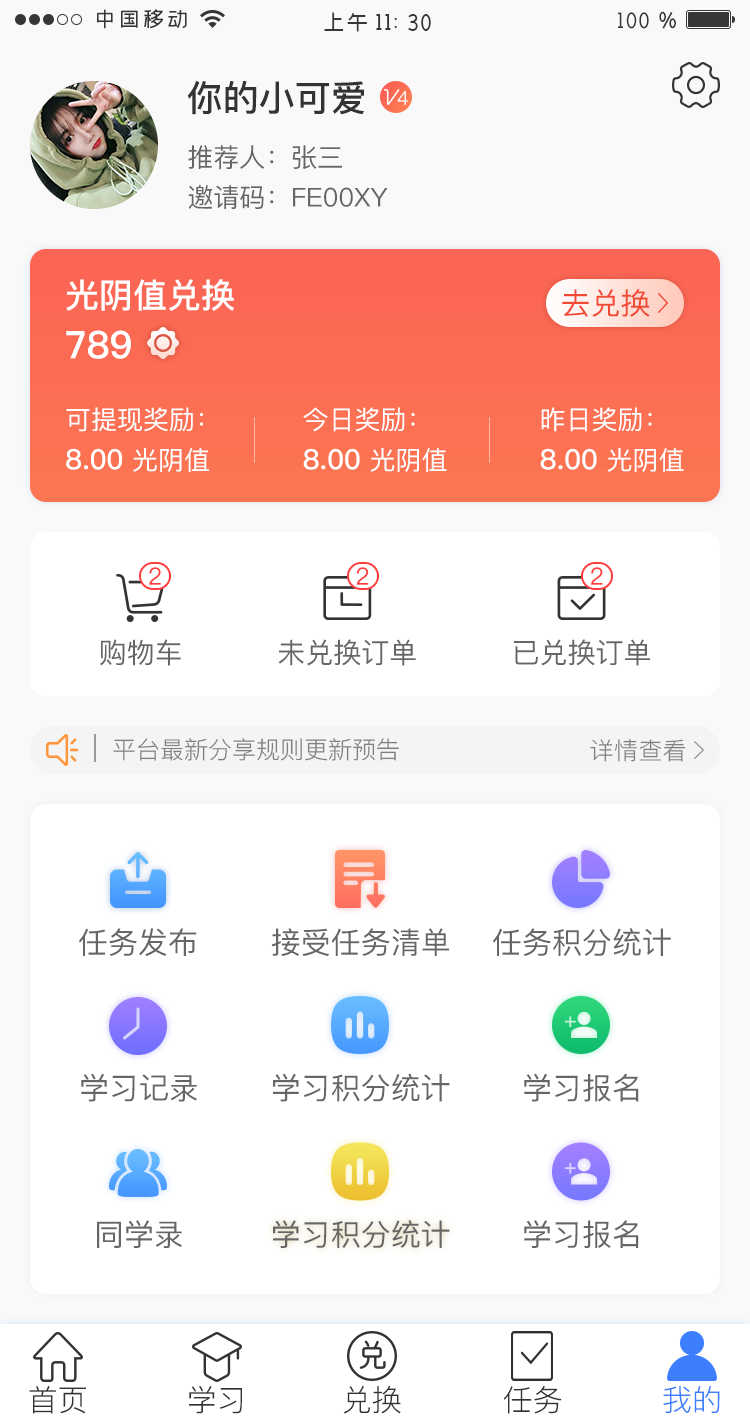
<style>
.page{position:relative;width:750px;height:1422px;background:#ffffff}
.page>*{position:absolute;margin:0}
.t1{font:36px "PingFang-SC-Bold";color:#333333;text-transform:uppercase}
.t2{font:26px "PingFang-SC-Medium";color:#666666;text-transform:uppercase}
.t3{font:34px "PingFang-SC-Bold";color:#ffffff;text-transform:uppercase}
.t4{font:30px "PingFang-SC-Medium";color:#f24934;text-transform:uppercase}
.t5{font:38px "PingFang-SC-Heavy";color:#ffffff;text-transform:uppercase}
.t6{font:26px "PingFang-SC-Medium";color:#ffffff;text-transform:uppercase}
.t7{font:28px "PingFang-SC-Bold";color:#ffffff;text-transform:uppercase}
.t8{font:24px "PingFang-SC-Medium";color:#ff3d3d;text-transform:uppercase}
.t9{font:28px "PingFang-SC-Medium";color:#666666;text-transform:uppercase}
.t10{font:24px "PingFang-SC-Regular";color:#808080}
.t11{font:24px "PingFang-SC-Regular";letter-spacing:0.015em;color:#808080}
.t12{font:30px "PingFang-SC-Medium";color:#666666;text-transform:uppercase}
.t13{font:30px "PingFang-SC-Regular";color:#333333;text-transform:uppercase}
.t14{font:30px "PingFang-SC-Regular";color:#3d7eff;text-transform:uppercase}
</style>
<div class="page">
<p class="t1" style="left:188px;top:80px;width:176px;height:35px">你的小可爱</p>
<p class="t2" style="left:188px;top:145px;width:154px;height:25px">推荐人：张三</p>
<p class="t2" style="left:188px;top:185px;width:200px;height:24px">邀请码：Fe00xy</p>
<p class="t3" style="left:66px;top:279px;width:168px;height:32px">光阴值兑换</p>
<p class="t4" style="left:562px;top:289px;width:88px;height:28px">去兑换</p>
<p class="t5" style="left:66px;top:330px;width:65px;height:29px">789</p>
<p class="t6" style="left:66px;top:407px;width:137px;height:25px">可提现奖励：</p>
<p class="t6" style="left:303px;top:407px;width:112px;height:25px">今日奖励：</p>
<p class="t6" style="left:541px;top:407px;width:111px;height:25px">昨日奖励：</p>
<p class="t7" style="left:66px;top:448px;width:143px;height:24px">8.00<span class="t6"> 光阴值</span></p>
<p class="t7" style="left:303px;top:448px;width:144px;height:24px">8.00<span class="t6"> 光阴值</span></p>
<p class="t7" style="left:540px;top:448px;width:144px;height:24px">8.00<span class="t6"> 光阴值</span></p>
<p class="t8" style="left:149px;top:567px;width:12px;height:18px">2</p>
<p class="t8" style="left:356px;top:567px;width:13px;height:18px">2</p>
<p class="t8" style="left:591px;top:567px;width:12px;height:18px">2</p>
<p class="t9" style="left:100px;top:639px;width:81px;height:27px">购物车</p>
<p class="t9" style="left:278px;top:639px;width:138px;height:27px">未兑换订单</p>
<p class="t9" style="left:514px;top:639px;width:136px;height:27px">已兑换订单</p>
<p class="t10" style="left:113px;top:738px;width:286px;height:23px">平台最新分享规则更新预告</p>
<p class="t11" style="left:590px;top:739px;width:96px;height:23px">详情查看</p>
<p class="t12" style="left:79px;top:928px;width:118px;height:28px">任务发布</p>
<p class="t12" style="left:271px;top:928px;width:178px;height:28px">接受任务清单</p>
<p class="t12" style="left:493px;top:928px;width:178px;height:28px">任务积分统计</p>
<p class="t12" style="left:81px;top:1073px;width:116px;height:29px">学习记录</p>
<p class="t12" style="left:273px;top:1073px;width:177px;height:29px">学习积分统计</p>
<p class="t12" style="left:524px;top:1073px;width:115px;height:29px">学习报名</p>
<p class="t12" style="left:97px;top:1220px;width:85px;height:28px">同学录</p>
<p class="t12" style="left:273px;top:1220px;width:177px;height:28px">学习积分统计</p>
<p class="t12" style="left:524px;top:1220px;width:115px;height:28px">学习报名</p>
<p class="t13" style="left:189px;top:1385px;width:53px;height:29px">学习</p>
<p class="t13" style="left:29px;top:1386px;width:57px;height:28px">首页</p>
<p class="t13" style="left:343px;top:1386px;width:58px;height:28px">兑换</p>
<p class="t13" style="left:504px;top:1386px;width:58px;height:28px">任务</p>
<p class="t14" style="left:663px;top:1386px;width:57px;height:27px">我的</p>
</div>
